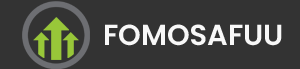
<style>
.page{position:relative;width:300px;height:69px;background:#333333}
.page>*{position:absolute;margin:0}
.t1{font:28.9px "Poppins-SemiBold";color:#f8f8f8}
</style>
<div class="page">
<p class="t1" style="left:105px;top:24px;width:177px;height:22px">FOMOSAFUU</p>
</div>
